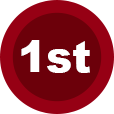
<style>
.page{position:relative;width:114px;height:114px;background:#6c000a}
.page>*{position:absolute;margin:0}
.t1{font:42.6px "Arial-Black";color:#ffffff}
</style>
<div class="page">
<p class="t1" style="left:21px;top:40px;width:69px;height:33px">1st</p>
</div>
